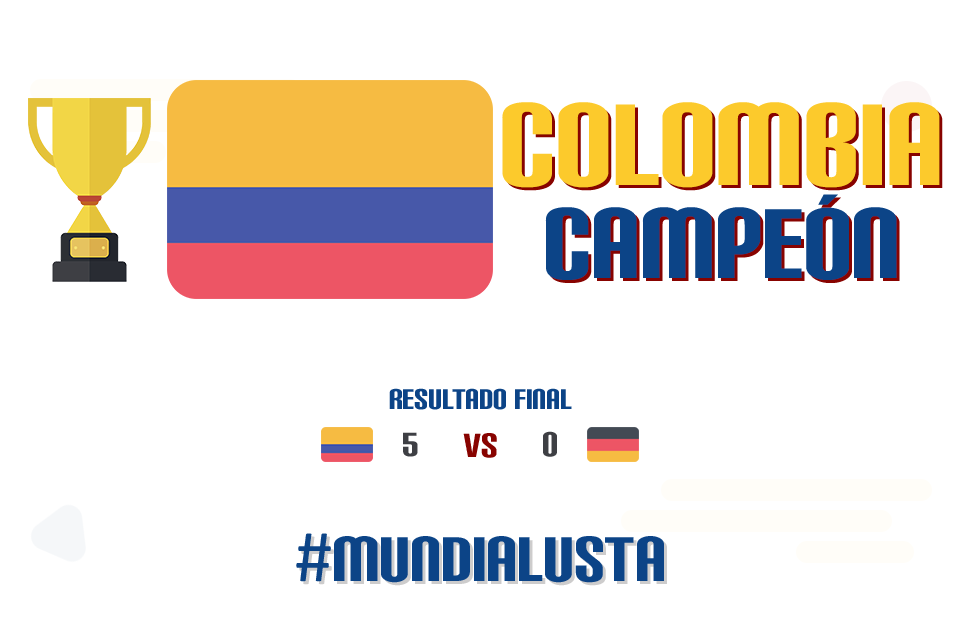
<style>
.page{position:relative;width:960px;height:642px;background:#ffffff}
.page>*{position:absolute;margin:0}
.t1{font:137.7px "CarbonBlock";color:#fcca2c}
.t2{font:117.8px "CarbonBlock";color:#0c4487}
.t3{font:33.7px "CarbonBlock";color:#0c4487}
.t4{font:40px "CarbonBlock";color:#3e3f44}
.t5{font:40px "CarbonBlock";color:#880300}
.t6{font:40.4px "CarbonBlock";color:#3e3f44;scale:0.96 1}
</style>
<div class="page">
<p class="t1" style="left:502px;top:102px;width:438px;height:86px">colombia</p>
<p class="t2" style="left:545px;top:194px;width:352px;height:86px">CAMPEÓN</p>
<p class="t3" style="left:389px;top:388px;width:183px;height:22px">rESULTADO final</p>
<p class="t4" style="left:403px;top:432px;width:15px;height:25px">5</p>
<p class="t5" style="left:463px;top:433px;width:34px;height:25px">vs</p>
<p class="t6" style="left:543px;top:431px;width:14px;height:26px">0</p>
</div>
